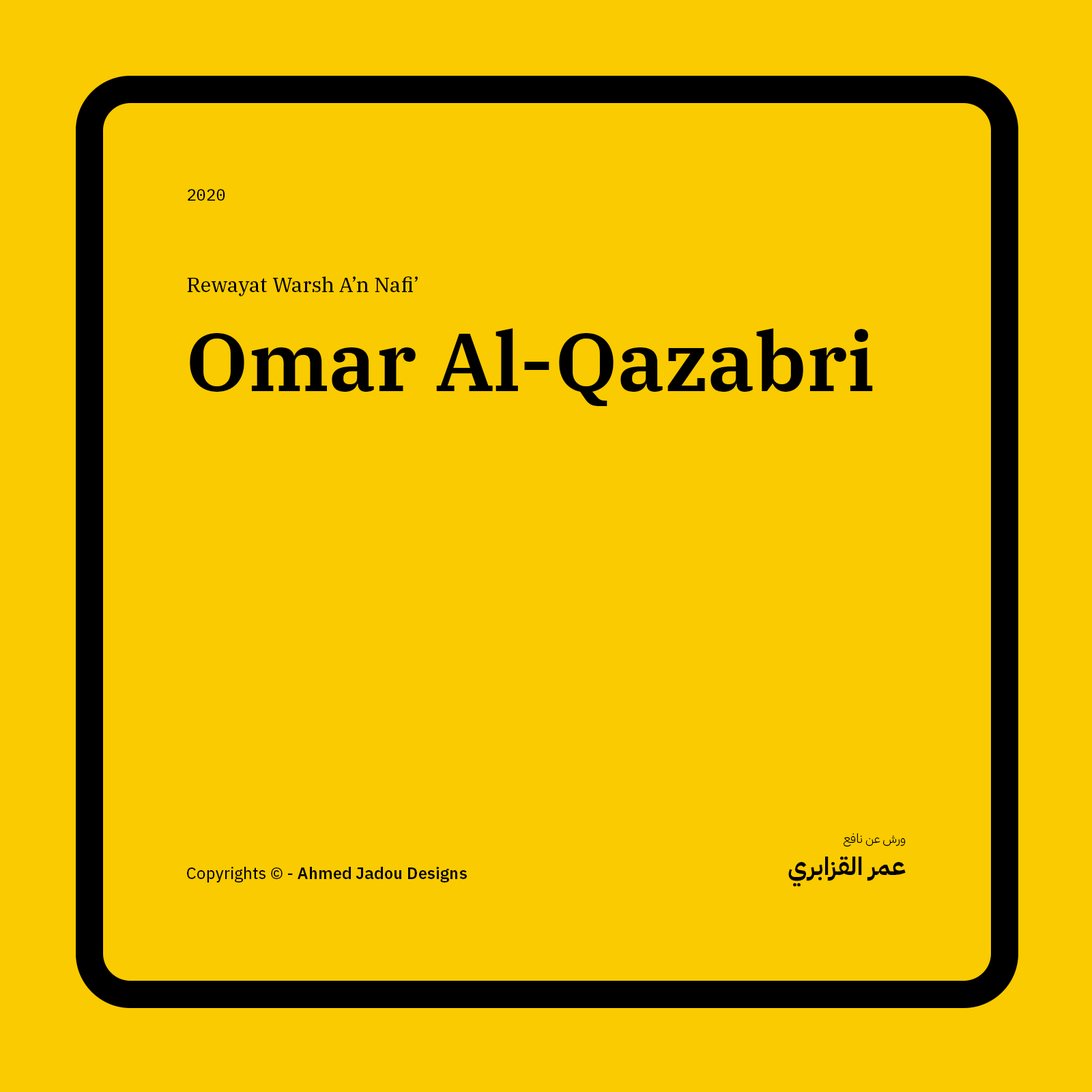
<style>
.page{position:relative;width:1092px;height:1092px;background:#facb00}
.page>*{position:absolute;margin:0}
.t1{font:16.4px "IBMPlexMono-Text";color:#000000}
.t2{font:20.5px "IBMPlexSerif-Text";color:#000000}
.t3{font:81.9px "IBMPlexSerif-SemiBold";color:#000000}
.t4{font:12.3px "IBMPlexArabic-Light";color:#000000}
.t5{font:24.6px "IBMPlexArabic-Bold";color:#000000}
.t6{font:16.4px "IBMPlexSans-SemiBold";color:#000000}
.t7{font:16.4px "IBMPlexSans-Text";color:#000000}
</style>
<div class="page">
<p class="t1" style="left:188px;top:189px;width:37px;height:12px">2020</p>
<p class="t2" style="left:187px;top:276px;width:231px;height:20px">Rewayat Warsh A’n Nafi’</p>
<p class="t3" style="left:190px;top:328px;width:683px;height:78px">Omar Al-Qazabri</p>
<p class="t4" style="left:844px;top:833px;width:62px;height:14px">ورش عن نافع</p>
<p class="t5" style="left:788px;top:857px;width:118px;height:30px">عمر القزابري</p>
<p class="t6" style="left:187px;top:867px;width:280px;height:15px"><span class="t7">Copyrights © - </span>Ahmed Jadou Designs</p>
</div>
